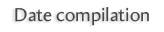
<style>
.page{position:relative;width:164px;height:32px;background:#ffffff}
.page>*{position:absolute;margin:0}
.t1{font:18.7px "Amira-Roman";color:#474747}
</style>
<div class="page">
<p class="t1" style="left:15px;top:7px;width:134px;height:19px">Date compilation</p>
</div>
